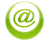
<style>
.page{position:relative;width:50px;height:40px;background:#ffffff}
.page>*{position:absolute;margin:0}
.t1{font:19px "IskoolaPota";font-weight:bold;scale:1.32 1}
</style>
<div class="page">
<p class="t1" style="left:13px;top:9px;width:22px;height:19px">@</p>
</div>
